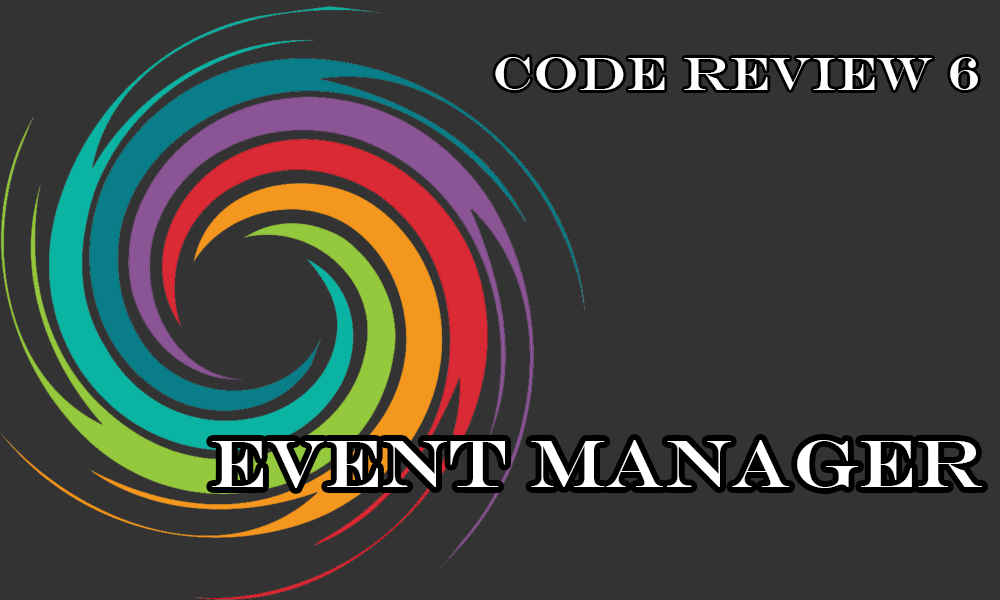
<style>
.page{position:relative;width:1000px;height:600px;background:#333333}
.page>*{position:absolute;margin:0}
.t1{font:48px "EngraversMT";color:#ffffff}
.t2{font:68px "EngraversMT";color:#ffffff}
</style>
<div class="page">
<p class="t1" style="left:495px;top:57px;width:483px;height:33px">code Review 6</p>
<p class="t2" style="left:212px;top:440px;width:770px;height:48px">Event Manager</p>
</div>
